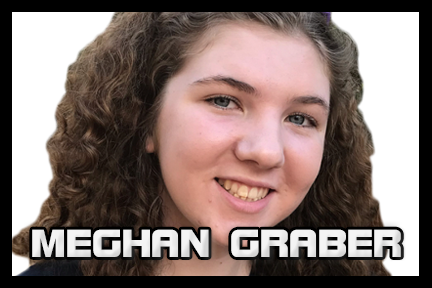
<style>
.page{position:relative;width:432px;height:288px}
.page>*{position:absolute;margin:0}
.t1{font:41.7px "BolsterBold";color:#f3f3f3}
</style>
<div class="page">
<p class="t1" style="left:32px;top:229px;width:369px;height:28px">MEGHAN GRABER</p>
</div>
